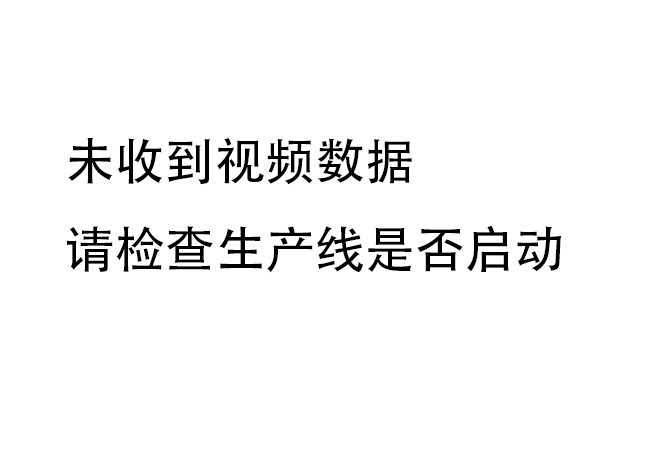
<style>
.page{position:relative;width:650px;height:450px;background:#ffffff}
.page>*{position:absolute;margin:0}
.t1{font:12px "AdobeHeitiStd-Regular";color:#000000}
</style>
<div class="page">
<p class="t1" style="left:67px;top:137px;width:495px;height:136px">未收到视频数据<br>请检查生产线是否启动</p>
</div>
